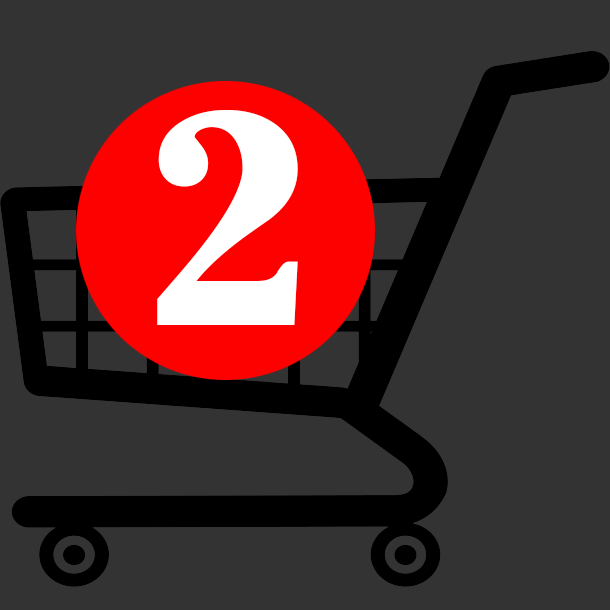
<style>
.page{position:relative;width:610px;height:610px;background:#333333}
.page>*{position:absolute;margin:0}
.t1{font:300px "VnChelthmBold";color:#ffffff}
</style>
<div class="page">
<p class="t1" style="left:157px;top:110px;width:141px;height:215px">2</p>
</div>
